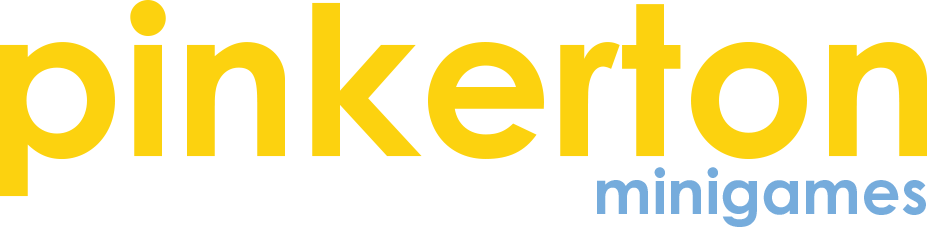
<style>
.page{position:relative;width:927px;height:227px;background:#ffffff}
.page>*{position:absolute;margin:0}
.t1{font:208.3px "CenturyGothicPro-Bold";color:#fcd20f}
.t2{font:62.5px "CenturyGothicPro-Bold";color:#76acdc}
</style>
<div class="page">
<p class="t1" style="left:0px;top:0px;width:927px;height:197px">pinkerton</p>
<p class="t2" style="left:597px;top:167px;width:329px;height:60px">minigames</p>
</div>
